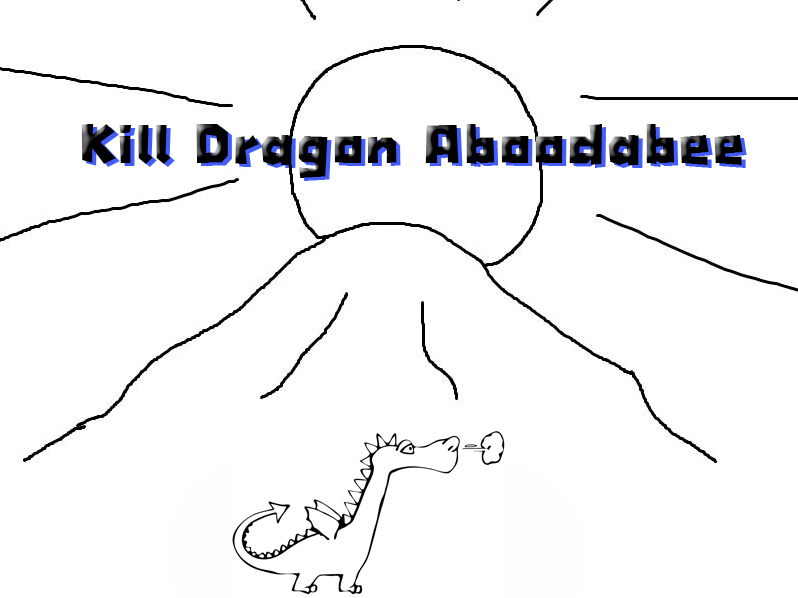
<style>
.page{position:relative;width:798px;height:598px;background:#ffffff}
.page>*{position:absolute;margin:0}
.t1{font:67.7px "-LayijiTaMaiTine1";color:#040404}
</style>
<div class="page">
<p class="t1" style="left:81px;top:124px;width:662px;height:54px">Kill Dragon Aboodabee</p>
</div>
